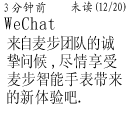
<style>
.page{position:relative;width:128px;height:128px;background:#ffffff}
.page>*{position:absolute;margin:0}
.t1{font:12px "KaiTi_GB2312";letter-spacing:0.1em;scale:0.9 1}
.t2{font:18px "NSimSun";letter-spacing:0.1em;color:#000000;scale:0.9 1}
.t3{font:16px/18px "SimSun";letter-spacing:0.1em;color:#000000;scale:0.9 1}
</style>
<div class="page">
<p class="t1" style="left:4px;top:2px;width:42px;height:12px">3分钟 前</p>
<p class="t1" style="left:71px;top:1px;width:55px;height:12px">未读(12/20)</p>
<p class="t2" style="left:4px;top:17px;width:51px;height:13px">WeChat</p>
<p class="t3" style="left:7px;top:35px;width:115px;height:70px">来自麦步团队的诚<br>挚问候,尽情享受 <br>麦步智能手表带来<br>的新体验吧．</p>
</div>
